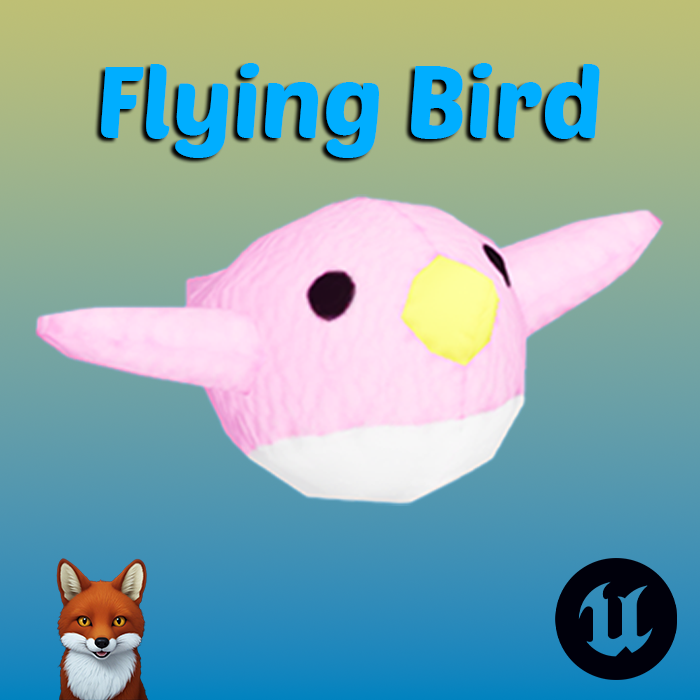
<style>
.page{position:relative;width:700px;height:700px}
.page>*{position:absolute;margin:0}
.t1{font:100px "PoetsenOne-Regular";color:#00aeff}
</style>
<div class="page">
<p class="t1" style="left:101px;top:63px;width:499px;height:95px">Flying Bird</p>
</div>
